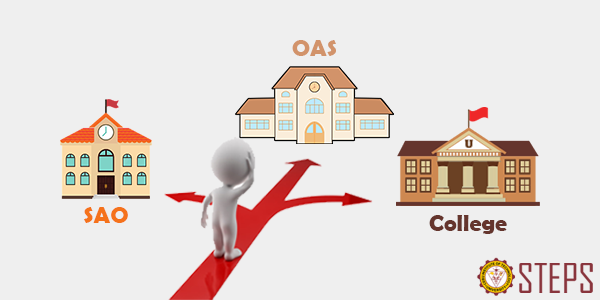
<style>
.page{position:relative;width:600px;height:300px;background:#efefef}
.page>*{position:absolute;margin:0}
.t1{font:24px "BerlinSansFBDemi-Bold";color:#d2936a}
.t2{font:24px "BerlinSansFBDemi-Bold";color:#f5721b}
.t3{font:24px "BerlinSansFBDemi-Bold";color:#65352d}
</style>
<div class="page">
<p class="t1" style="left:292px;top:40px;width:44px;height:16px">OAS</p>
<p class="t2" style="left:84px;top:207px;width:44px;height:16px">SAO</p>
<p class="t3" style="left:429px;top:215px;width:78px;height:19px">College</p>
</div>
